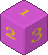
<style>
.page{position:relative;width:48px;height:55px;background:#ffffff}
.page>*{position:absolute;margin:0}
.t1{font:15px "Georgia";color:#dfc305;scale:1.39 1}
.t2{font:17px "Georgia";color:#d6bb05;scale:1.42 1}
.t3{font:16.7px "Georgia";color:#ac9604;scale:1.52 1}
</style>
<div class="page">
<p class="t1" style="left:18px;top:9px;width:12px;height:7px;rotate:28deg">1</p>
<p class="t2" style="left:5px;top:27px;width:11px;height:13px;rotate:30deg">2</p>
<p class="t3" style="left:31px;top:27px;width:11px;height:16px;rotate:-28deg">3</p>
</div>
